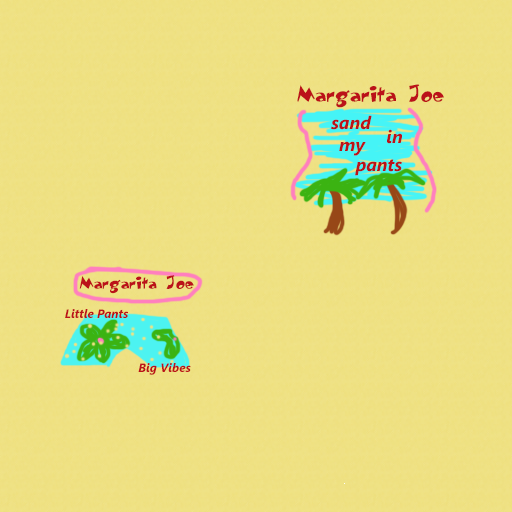
<style>
.page{position:relative;width:512px;height:512px}
.page>*{position:absolute;margin:0}
.t1{font:18px "DogtectiveRegular";color:#bb1219}
.t2{font:18px "SegoeUI-BoldItalic";color:#bb1219}
.t3{font:14px "DogtectiveRegular";color:#bb1219}
.t4{font:12px "SegoeUI-BoldItalic";color:#bb1219}
</style>
<div class="page">
<p class="t1" style="left:297px;top:84px;width:147px;height:24px">Margarita Joe</p>
<p class="t2" style="left:331px;top:115px;width:41px;height:15px">sand</p>
<p class="t2" style="left:387px;top:129px;width:15px;height:15px">in</p>
<p class="t2" style="left:339px;top:141px;width:27px;height:15px">my</p>
<p class="t2" style="left:355px;top:159px;width:47px;height:17px">pants</p>
<p class="t3" style="left:79px;top:275px;width:115px;height:19px">Margarita Joe</p>
<p class="t4" style="left:65px;top:309px;width:63px;height:9px">Little Pants</p>
<p class="t4" style="left:138px;top:363px;width:53px;height:12px">Big Vibes</p>
</div>
